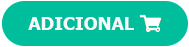
<style>
.page{position:relative;width:189px;height:47px;background:#00bd9c}
.page>*{position:absolute;margin:0}
.t1{font:18px "Tahoma-Bold";color:#f6f9f8}
</style>
<div class="page">
<p class="t1" style="left:28px;top:17px;width:106px;height:13px">ADICIONAL</p>
</div>
